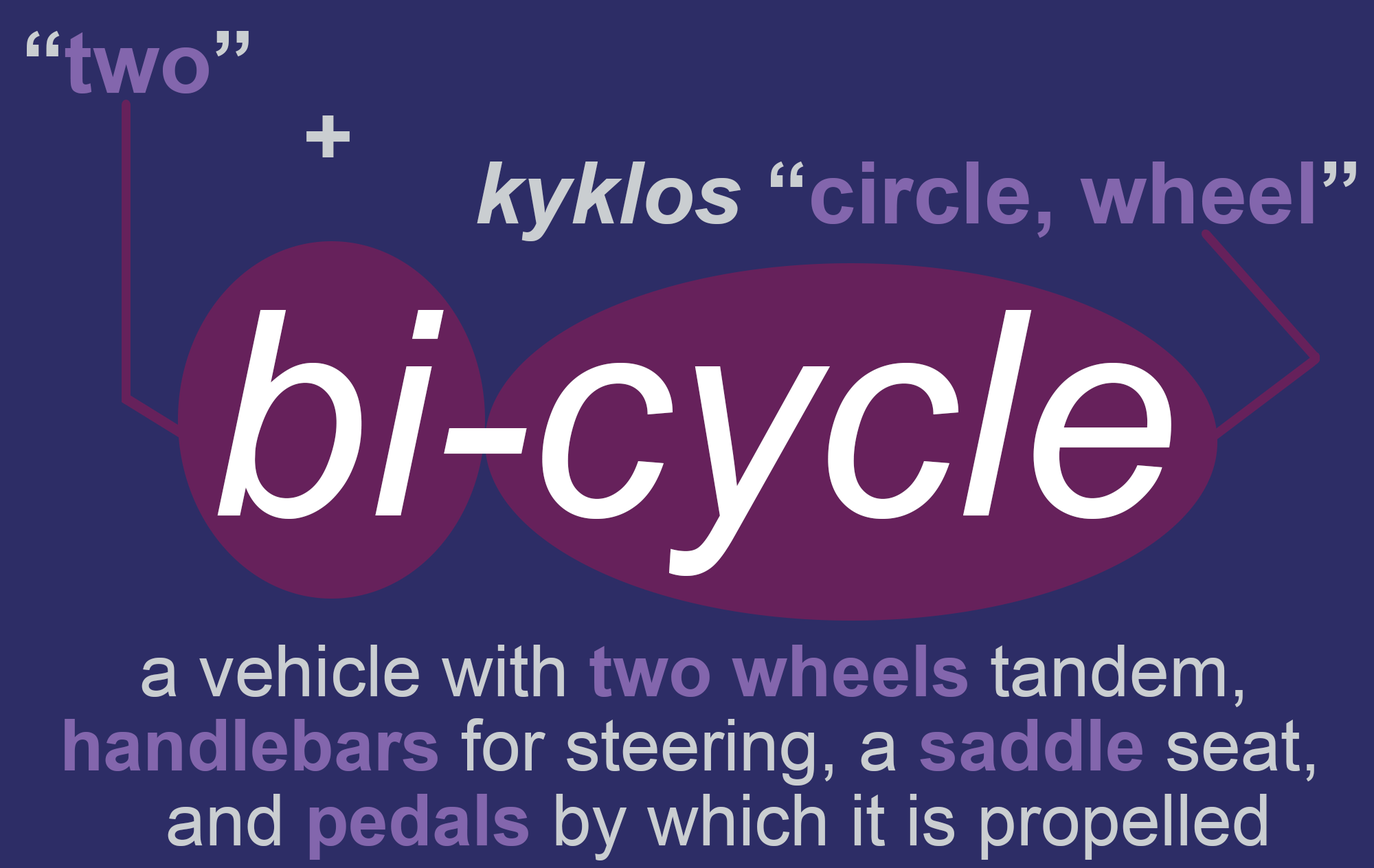
<style>
.page{position:relative;width:1374px;height:868px;background:#2d2d66}
.page>*{position:absolute;margin:0}
.t1{font:85.9px "Arial-BoldMT";color:#8366ad}
.t2{font:85.9px "Arial-BoldMT";color:#caced1}
.t3{font:85.7px "Arial-BoldMT";color:#caced1}
.t4{font:85.9px "Arial-BoldItalicMT";color:#caced1}
.t5{font:286.3px "Arial-ItalicMT";color:#ffffff}
.t6{font:71.6px "ArialMT";color:#caced1}
.t7{font:71.6px "Arial-BoldMT";color:#8366ad}
</style>
<div class="page">
<p class="t1" style="left:27px;top:31px;width:222px;height:62px"><span class="t2">“</span>two<span class="t2">”</span></p>
<p class="t3" style="left:306px;top:115px;width:44px;height:42px">+</p>
<p class="t1" style="left:477px;top:161px;width:879px;height:80px"><span class="t4">kyklos </span><span class="t2">“</span>circle, wheel<span class="t2">”</span></p>
<p class="t5" style="left:217px;top:310px;width:954px;height:266px">bi-cycle</p>
<p class="t6" style="left:142px;top:644px;width:1101px;height:63px">a vehicle with <span class="t7">two wheels</span> tandem,</p>
<p class="t6" style="left:65px;top:718px;width:1249px;height:67px"><span class="t7">handlebars </span>for steering, a <span class="t7">saddle </span>seat,</p>
<p class="t6" style="left:168px;top:794px;width:1099px;height:66px">and <span class="t7">pedals </span>by which it is propelled</p>
</div>
